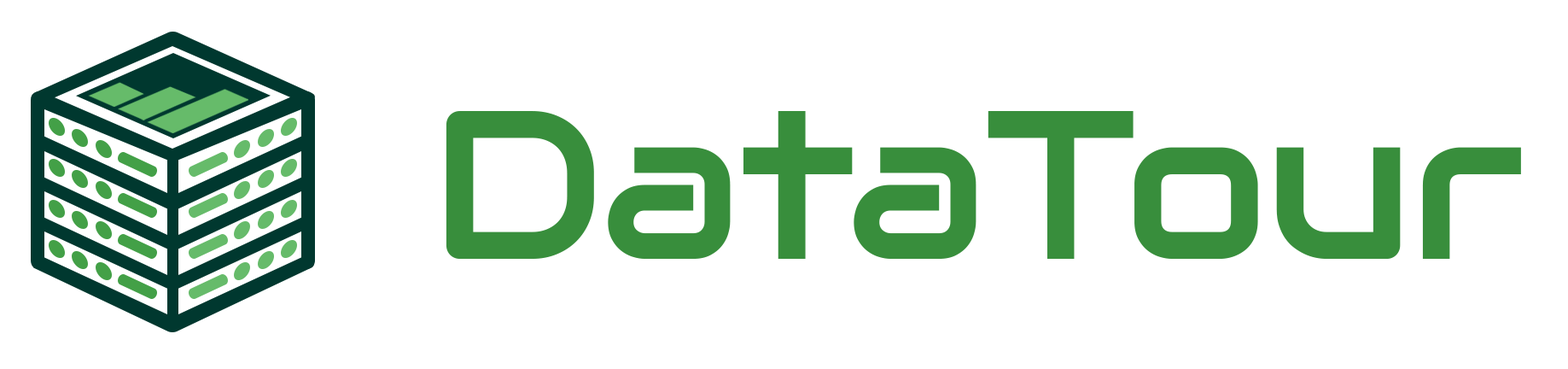
<style>
.page{position:relative;width:1568px;height:369px;background:#ffffff}
.page>*{position:absolute;margin:0}
.t1{font:211.2px "Audiowide-Regular";letter-spacing:-0.01em;color:#388e3c}
</style>
<div class="page">
<p class="t1" style="left:446px;top:111px;width:1075px;height:148px">DataTour</p>
</div>
